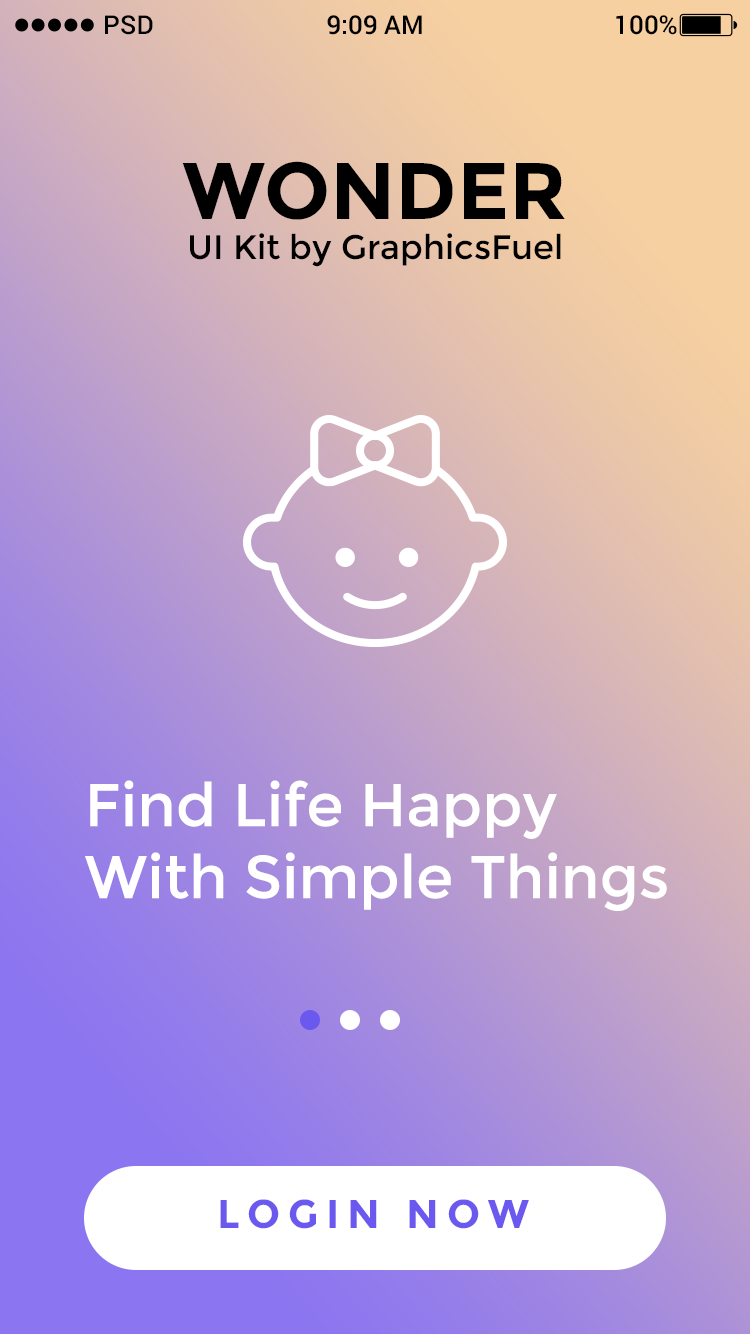
<style>
.page{position:relative;width:750px;height:1334px}
.page>*{position:absolute;margin:0}
.t1{font:26px "Roboto-Medium";color:#000000}
.t2{font:80px "Montserrat-Bold";color:#000000}
.t3{font:34px "Montserrat-Regular";color:#000000}
.t4{font:60px "Montserrat-Regular";color:#ffffff}
.t5{font:40px "Montserrat-Bold";letter-spacing:0.2em;color:#6b59ef;text-transform:uppercase}
</style>
<div class="page">
<p class="t1" style="left:105px;top:15px;width:48px;height:20px">PSD</p>
<p class="t1" style="left:327px;top:15px;width:95px;height:20px">9:09 AM</p>
<p class="t1" style="left:616px;top:15px;width:61px;height:20px">100%</p>
<p class="t2" style="left:182px;top:161px;width:383px;height:59px">WONDER</p>
<p class="t3" style="left:190px;top:233px;width:371px;height:34px">UI Kit by GraphicsFuel</p>
<p class="t4" style="left:85px;top:780px;width:582px;height:131px">Find Life Happy<br>With Simple Things</p>
<p class="t5" style="left:220px;top:1199px;width:309px;height:30px">Login Now</p>
</div>
